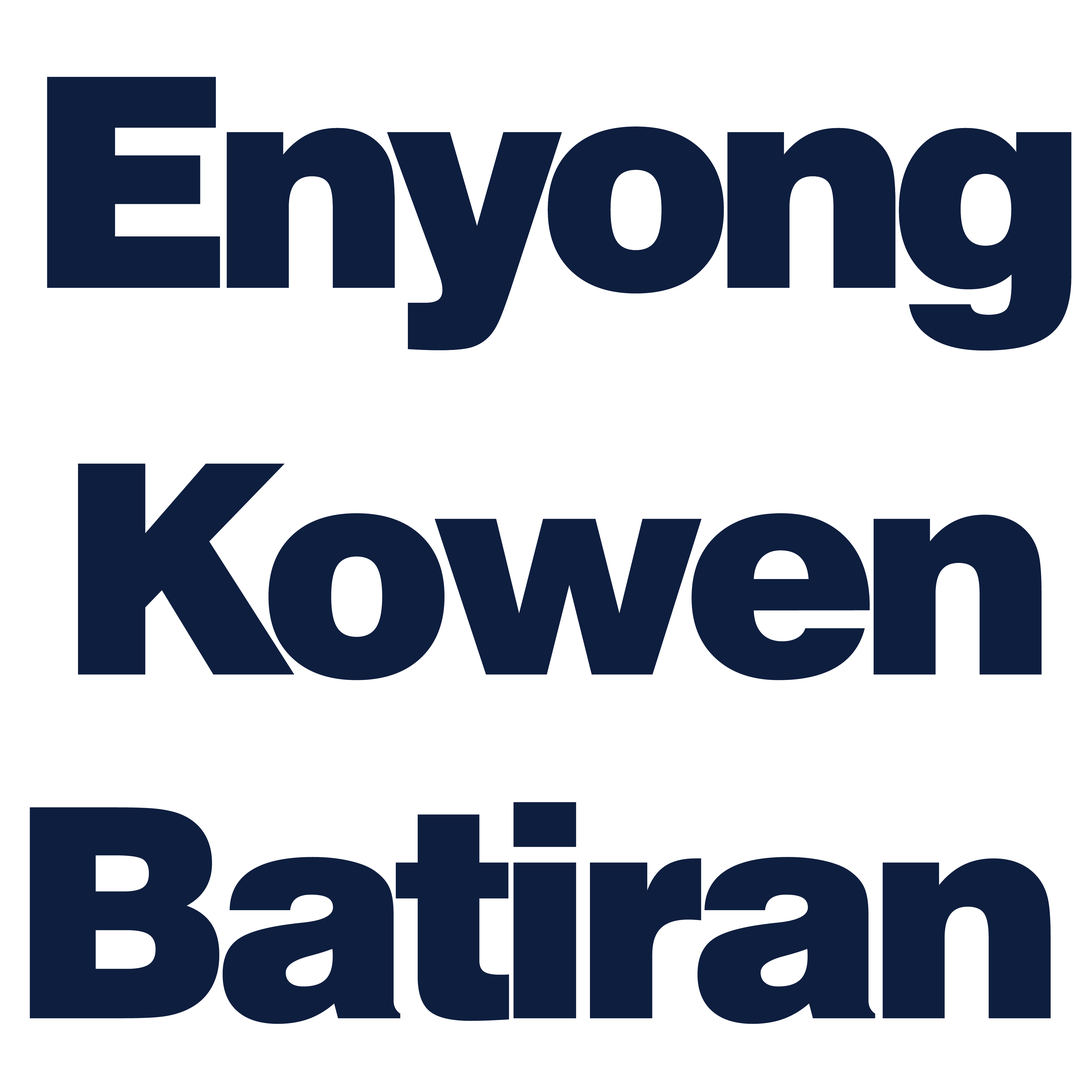
<style>
.page{position:relative;width:1092px;height:1092px;background:#ffffff}
.page>*{position:absolute;margin:0}
.t1{font:292.9px "Swiss721BT-Black";letter-spacing:-0.1em;color:#0e1e3f;font-weight:bold}
</style>
<div class="page">
<p class="t1" style="left:47px;top:77px;width:1025px;height:274px">Enyong</p>
<p class="t1" style="left:47px;top:77px;width:1025px;height:274px">Enyong</p>
<p class="t1" style="left:78px;top:464px;width:964px;height:216px">Kowen</p>
<p class="t1" style="left:30px;top:802px;width:1021px;height:222px">Batiran</p>
</div>
